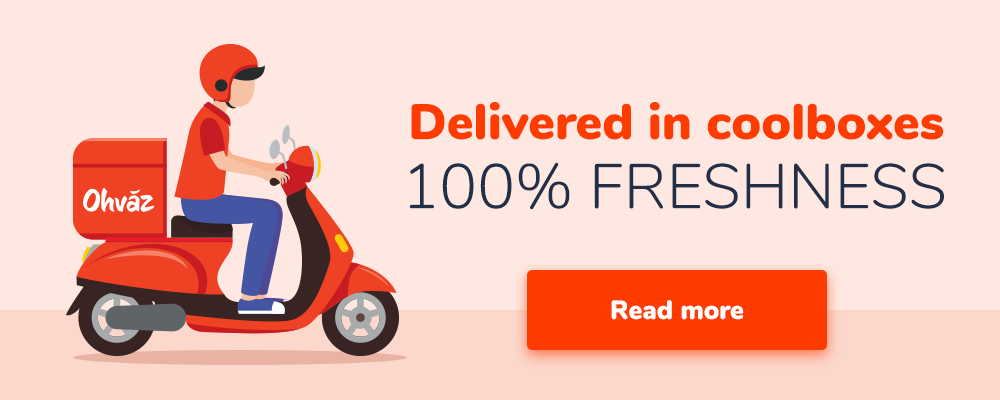
<style>
.page{position:relative;width:1000px;height:400px;background:#fee8e1}
.page>*{position:absolute;margin:0}
.t1{font:50px "Nunito-Black";color:#ff3c00}
.t2{font:63px "Nunito-Light";color:#212f49;text-transform:uppercase}
.t3{font:26px "Nunito-Black";color:#ffffff}
</style>
<div class="page">
<p class="t1" style="left:411px;top:102px;width:533px;height:38px">Delivered in coolboxes</p>
<p class="t2" style="left:409px;top:162px;width:535px;height:48px">100% freshness</p>
<p class="t3" style="left:611px;top:300px;width:133px;height:20px">Read more</p>
</div>
